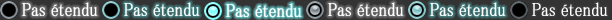
<style>
.page{position:relative;width:612px;height:20px;background:#333333}
.page>*{position:absolute;margin:0}
.t1{font:19px "MS-PMincho";color:#ffffff;font-weight:bold;scale:0.84 1}
</style>
<div class="page">
<p class="t1" style="left:22px;top:2px;width:76px;height:15px">Pas étendu</p>
<p class="t1" style="left:124px;top:2px;width:76px;height:15px">Pas étendu</p>
<p class="t1" style="left:226px;top:3px;width:76px;height:15px">Pas étendu</p>
<p class="t1" style="left:328px;top:2px;width:76px;height:15px">Pas étendu</p>
<p class="t1" style="left:430px;top:2px;width:76px;height:15px">Pas étendu</p>
<p class="t1" style="left:532px;top:2px;width:76px;height:15px">Pas étendu</p>
</div>
